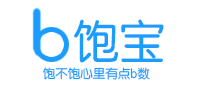
<style>
.page{position:relative;width:200px;height:100px;background:#ffffff}
.page>*{position:absolute;margin:0}
.t1{font:45.8px "FZY3JW--GB1-0";color:#1b9dff}
.t2{font:12.5px "FZY3JW--GB1-0";color:#1b9dff}
</style>
<div class="page">
<p class="t1" style="left:74px;top:19px;width:90px;height:44px">饱宝</p>
<p class="t2" style="left:43px;top:67px;width:107px;height:13px">饱不饱心里有点b数</p>
</div>
